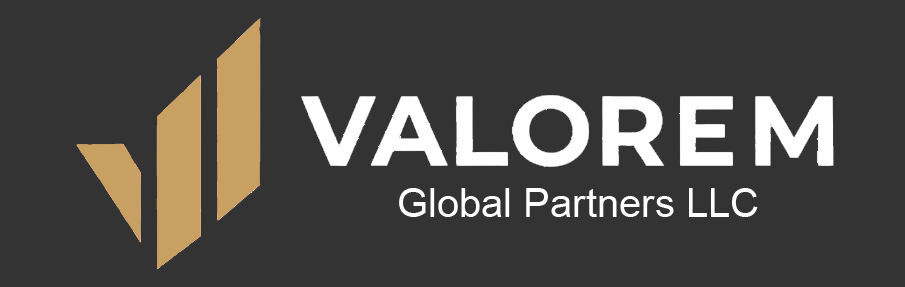
<style>
.page{position:relative;width:905px;height:287px;background:#333333}
.page>*{position:absolute;margin:0}
.t1{font:40px "ArialMT";color:#ffffff}
</style>
<div class="page">
<p class="t1" style="left:399px;top:188px;width:359px;height:29px">Global Partners LLC</p>
</div>
